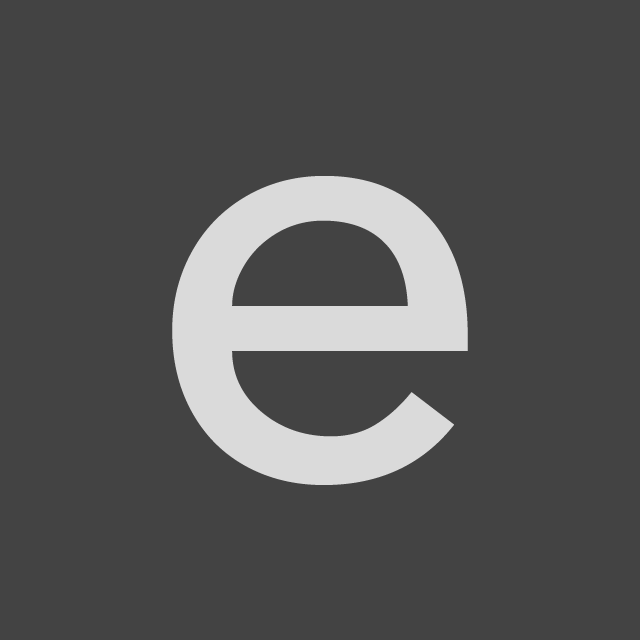
<style>
.page{position:relative;width:640px;height:640px;background:#434343}
.page>*{position:absolute;margin:0}
.t1{font:620.4px "AvenirLT-Medium";color:#dadada}
</style>
<div class="page">
<p class="t1" style="left:172px;top:176px;width:296px;height:309px">e</p>
</div>
